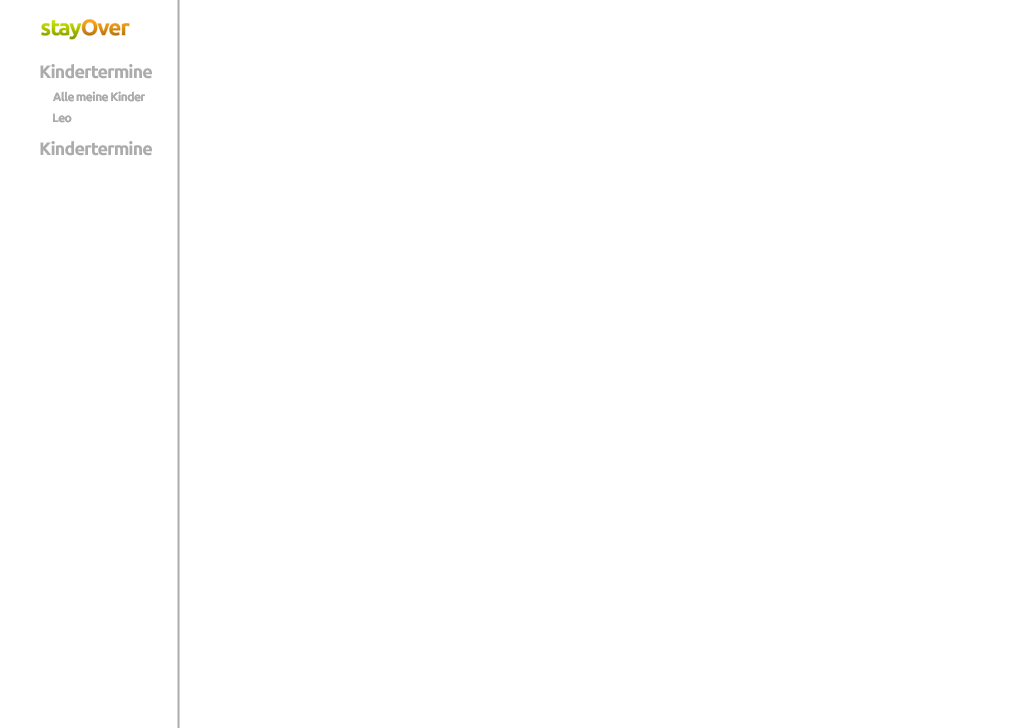
<style>
.page{position:relative;width:1024px;height:728px;background:#ffffff}
.page>*{position:absolute;margin:0}
.t1{font:18px "Ubuntu-Bold";letter-spacing:-0.05em;color:#acacac}
.t2{font:12px "Ubuntu-Bold";letter-spacing:-0.05em;color:#acacac}
</style>
<div class="page">
<p class="t1" style="left:40px;top:64px;width:112px;height:15px">Kindertermine</p>
<p class="t2" style="left:53px;top:91px;width:92px;height:11px">Alle meine Kinder</p>
<p class="t2" style="left:53px;top:113px;width:19px;height:10px">Leo</p>
<p class="t1" style="left:40px;top:141px;width:112px;height:15px">Kindertermine</p>
</div>
